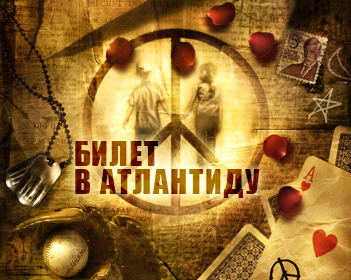
<style>
.page{position:relative;width:351px;height:280px}
.page>*{position:absolute;margin:0}
.t1{font:31.2px/28.6px "Impact";letter-spacing:0.05em;text-transform:uppercase}
.t2{font:31.2px/28.6px "Impact";text-transform:uppercase}
</style>
<div class="page">
<p class="t1" style="left:75px;top:141px;width:185px;height:57px"><span class="t2">Б</span>илет<br>в Атлантиду</p>
</div>
